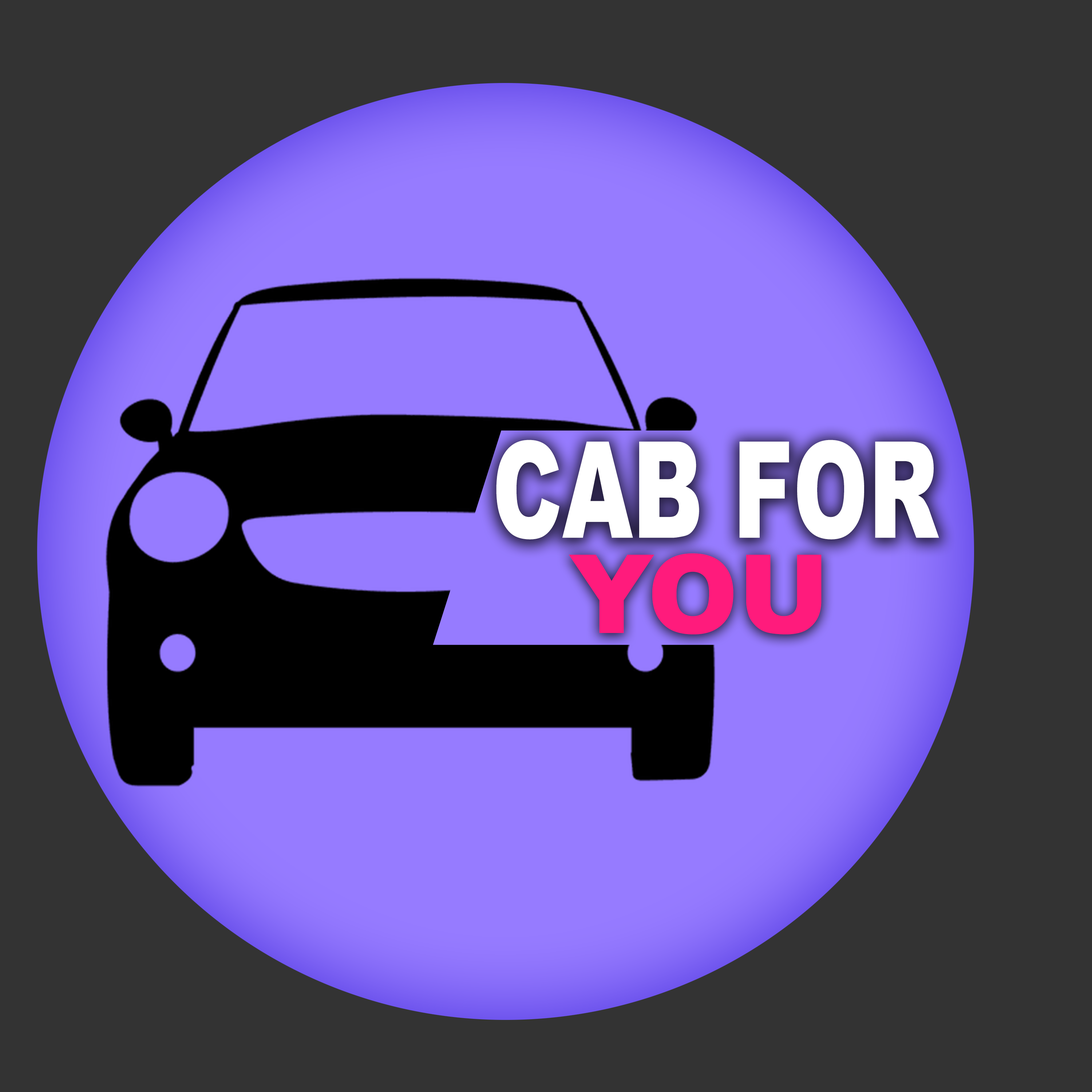
<style>
.page{position:relative;width:1092px;height:1092px;background:#333333}
.page>*{position:absolute;margin:0}
.t1{font:134.1px "Arial-Black";color:#ffffff;scale:0.67 1}
.t2{font:109.2px "Arial-Black";color:#ff1b7c}
</style>
<div class="page">
<p class="t1" style="left:496px;top:440px;width:443px;height:99px">CAB FOR</p>
<p class="t2" style="left:569px;top:553px;width:253px;height:81px">YOU</p>
</div>
